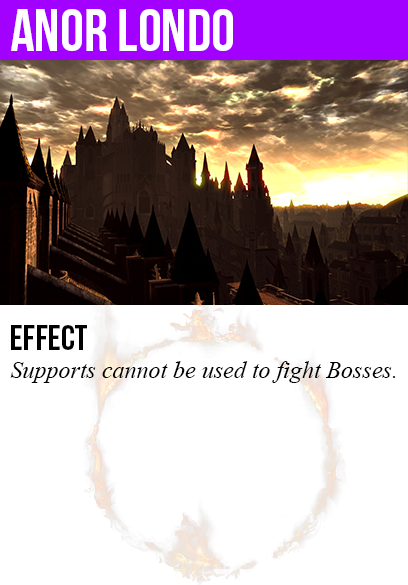
<style>
.page{position:relative;width:408px;height:585px;background:#ffffff}
.page>*{position:absolute;margin:0}
.t1{font:60px "BebasNeue";color:#ffffff}
.t2{font:36px "BebasNeue";color:#000000}
.t3{font:24px "TimesNewRomanPS-ItalicMT";color:#000000}
</style>
<div class="page">
<p class="t1" style="left:11px;top:9px;width:222px;height:42px">anor londo</p>
<p class="t2" style="left:11px;top:325px;width:76px;height:25px">Effect</p>
<p class="t3" style="left:10px;top:361px;width:386px;height:22px">Supports cannot be used to fight Bosses.</p>
</div>
